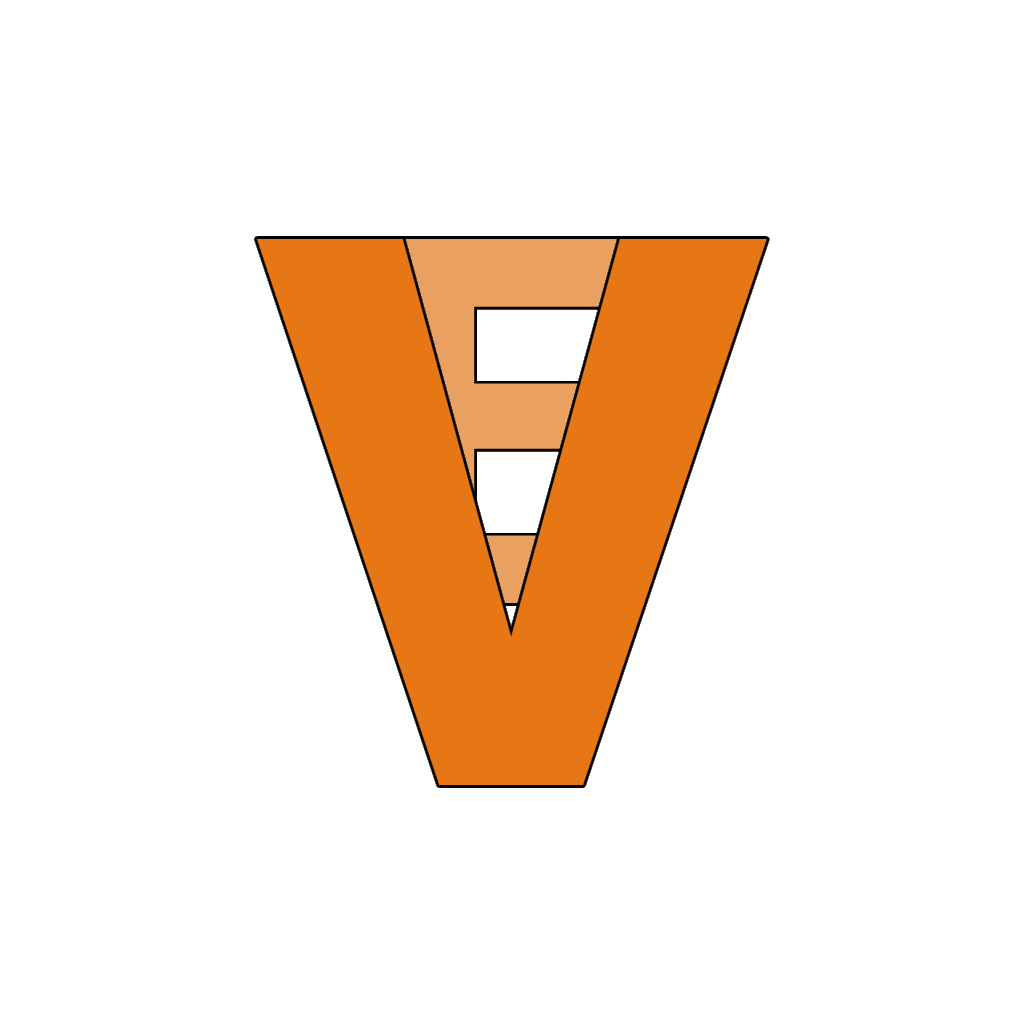
<style>
.page{position:relative;width:1024px;height:1024px;background:#ffffff}
.page>*{position:absolute;margin:0}
.t1{font:768px "Roboto-Black";color:#e77714}
.t2{font:512px "Roboto-Black"}
</style>
<div class="page">
<p class="t1" style="left:256px;top:239px;width:511px;height:546px">V</p>
<p class="t2" style="left:386px;top:239px;width:252px;height:364px">E</p>
</div>
